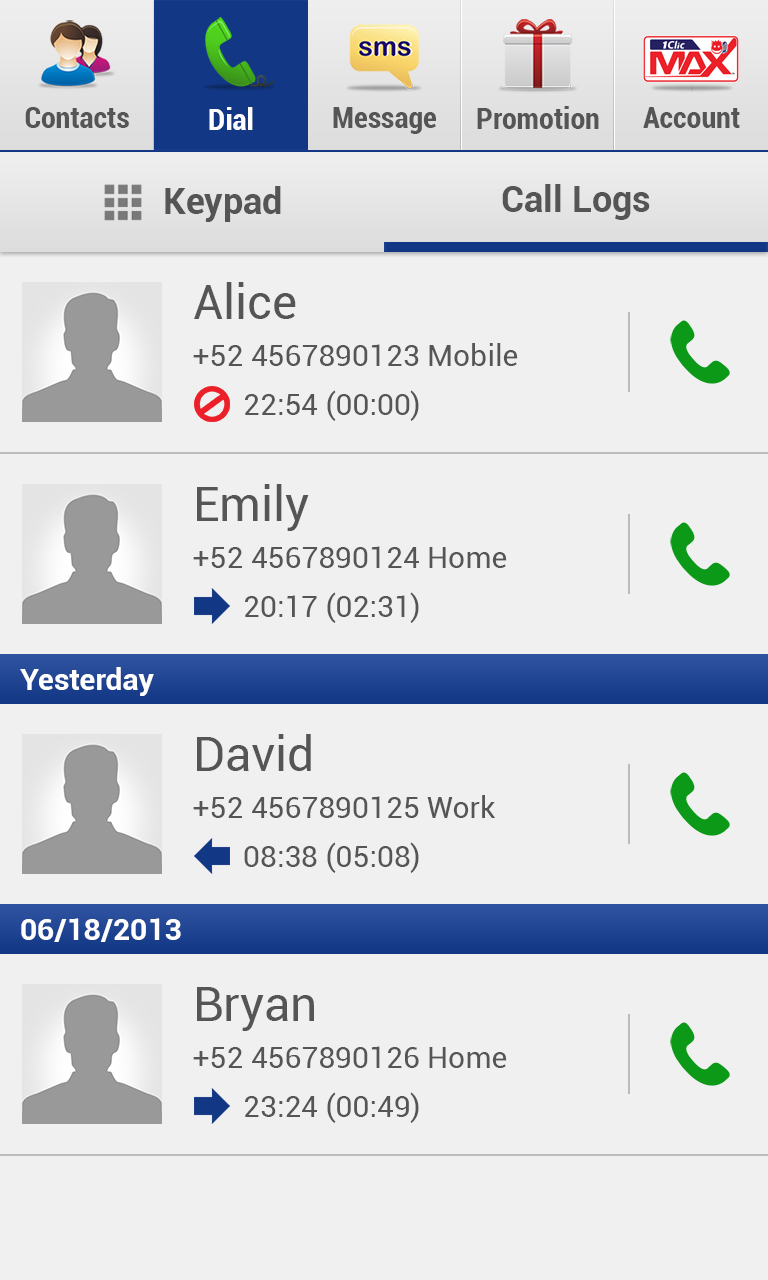
<style>
.page{position:relative;width:768px;height:1280px;background:#f0f0f0}
.page>*{position:absolute;margin:0}
.t1{font:30px "Roboto-BoldCondensed";color:#555555}
.t2{font:30px "Roboto-BoldCondensed";color:#ffffff}
.t3{font:36px "Roboto-Bold";color:#555555}
.t4{font:48px "Roboto-Regular";color:#555555}
.t5{font:30px "Roboto-Regular";color:#555555}
.t6{font:30px "Roboto-Bold";color:#ffffff}
</style>
<div class="page">
<p class="t1" style="left:25px;top:107px;width:104px;height:21px">Contacts</p>
<p class="t2" style="left:209px;top:107px;width:44px;height:23px">Dial</p>
<p class="t1" style="left:333px;top:107px;width:103px;height:27px">Message</p>
<p class="t1" style="left:477px;top:106px;width:122px;height:23px">Promotion</p>
<p class="t1" style="left:643px;top:107px;width:97px;height:21px">Account</p>
<p class="t3" style="left:502px;top:184px;width:148px;height:36px">Call Logs</p>
<p class="t3" style="left:165px;top:186px;width:116px;height:36px">Keypad</p>
<p class="t4" style="left:194px;top:282px;width:102px;height:37px">Alice</p>
<p class="t5" style="left:193px;top:343px;width:325px;height:23px">+52 4567890123 Mobile</p>
<p class="t5" style="left:245px;top:390px;width:174px;height:31px">22:54 (00:00)</p>
<p class="t4" style="left:197px;top:484px;width:112px;height:47px">Emily</p>
<p class="t5" style="left:193px;top:546px;width:314px;height:22px">+52 4567890124 Home</p>
<p class="t5" style="left:245px;top:592px;width:174px;height:31px">20:17 (02:31)</p>
<p class="t6" style="left:20px;top:667px;width:134px;height:29px">Yesterday</p>
<p class="t4" style="left:197px;top:734px;width:114px;height:37px">David</p>
<p class="t5" style="left:193px;top:795px;width:302px;height:23px">+52 4567890125 Work</p>
<p class="t5" style="left:244px;top:842px;width:175px;height:31px">08:38 (05:08)</p>
<p class="t6" style="left:21px;top:918px;width:160px;height:24px">06/18/2013</p>
<p class="t4" style="left:197px;top:987px;width:117px;height:44px">Bryan</p>
<p class="t5" style="left:193px;top:1046px;width:314px;height:22px">+52 4567890126 Home</p>
<p class="t5" style="left:245px;top:1092px;width:174px;height:31px">23:24 (00:49)</p>
</div>
